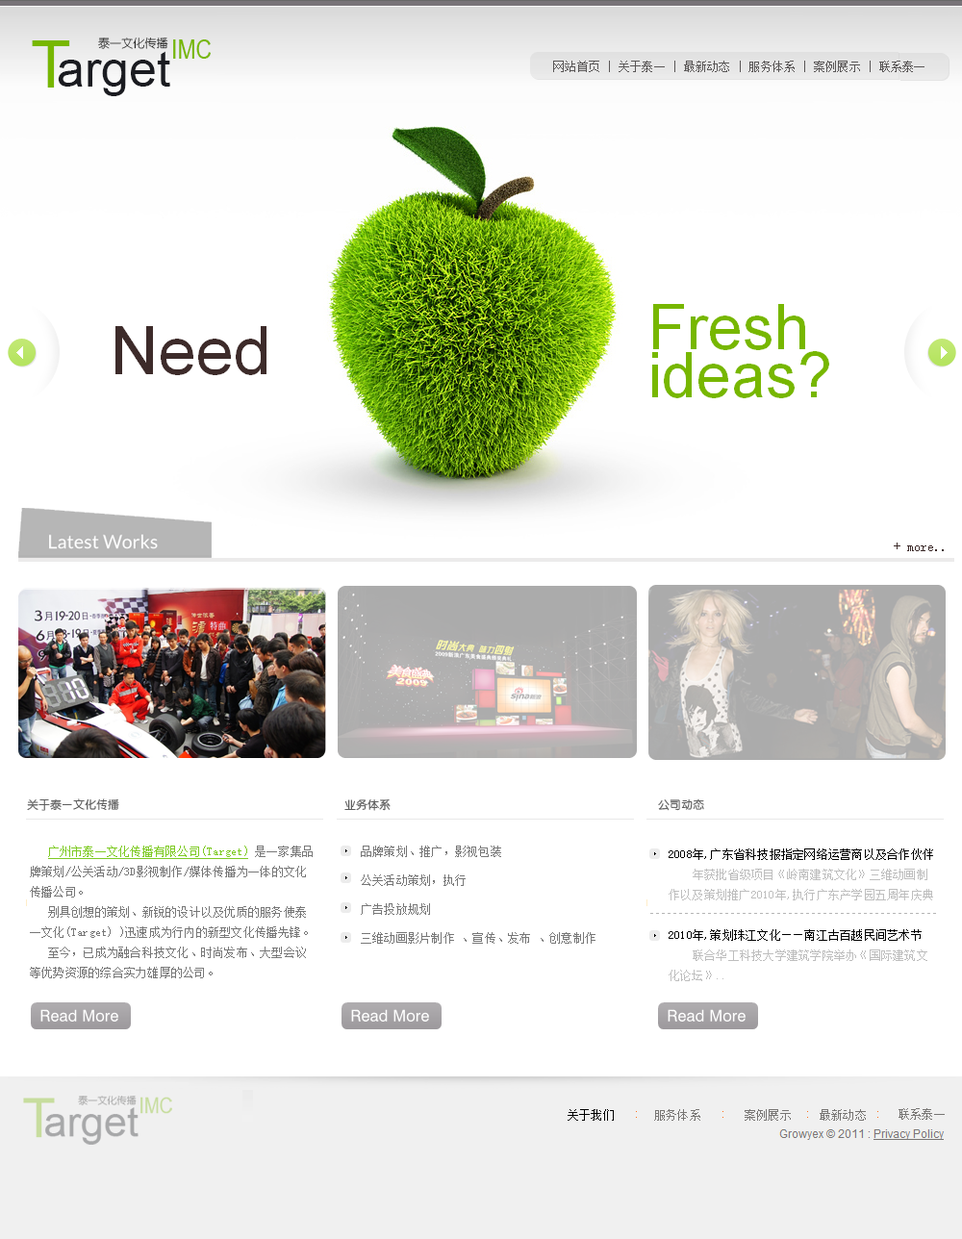
<style>
.page{position:relative;width:962px;height:1239px;background:#ffffff}
.page>*{position:absolute;margin:0}
.t1{font:65.4px "ArialMT";color:#77b700}
.t2{font:11.5px "FZY1JW--GB1-0"}
.t3{font:26.9px "ArialNarrow";color:#77b700}
.t4{font:50px "ArialMT";color:#1b1c21}
.t5{font:11.5px "SimSun";letter-spacing:0.02em;color:#595656}
.t6{font:13.5px "SimSun";color:#3d2b2a}
.t7{font:11.5px "HYe3gj";color:#5e5e5e}
.t8{font:11.5px "SimSun";letter-spacing:0.02em;color:#777777}
.t9{font:11.5px "SimSun";letter-spacing:0.02em;color:#7eca24}
.t10{font:11.5px/28.9px "SimSun";letter-spacing:0.02em;color:#777777}
.t11{font:11.5px "SimSun";letter-spacing:0.02em;color:#bebebe}
.t12{font:11.5px "SimSun";letter-spacing:0.02em;color:#000000}
.t13{font:11.5px "SimSun";letter-spacing:0.02em;color:#787674}
</style>
<div class="page">
<p class="t1" style="left:32px;top:40px;width:38px;height:48px">T</p>
<p class="t2" style="left:98px;top:38px;width:70px;height:11px">泰一文化传播</p>
<p class="t3" style="left:173px;top:39px;width:38px;height:20px">IMC</p>
<p class="t4" style="left:58px;top:51px;width:112px;height:45px">arget</p>
<p class="t5" style="left:553px;top:61px;width:372px;height:11px">网站首页 | 关于泰一 | 最新动态 | 服务体系 | 案例展示 | 联系泰一</p>
<p class="t6" style="left:894px;top:543px;width:50px;height:8px">+ more..</p>
<p class="t7" style="left:27px;top:799px;width:92px;height:12px">关于泰一文化传播</p>
<p class="t7" style="left:344px;top:800px;width:47px;height:11px">业务体系</p>
<p class="t7" style="left:658px;top:799px;width:46px;height:12px">公司动态</p>
<p class="t8" style="left:30px;top:846px;width:283px;height:133px"><span class="t9">广州市泰一文化传播有限公司(Target)</span> 是一家集品牌策划/公关活动/3D影视制作/媒体传播为一体的文化传播公司。<br>   别具创想的策划、新锐的设计以及优质的服务使泰一文化(Target) )迅速成为行内的新型文化传播先锋。<br>   至今，已成为融合科技文化、时尚发布、大型会议等优势资源的综合实力雄厚的公司。</p>
<p class="t10" style="left:361px;top:846px;width:235px;height:98px">品牌策划、推广，影视包装<br>公关活动策划，执行<br>广告投放规划<br>三维动画影片制作 、宣传、发布 、创意制作</p>
<p class="t11" style="left:669px;top:849px;width:264px;height:132px"><span class="t12">2008年,广东省科技报指定网络运营商以及合作伙伴<br>  </span>  年获批省级项目《岭南建筑文化》三维动画制作以及策划推广2010年,执行广东产学园五周年庆典<br><span class="t12"><br>2010年,策划珠江文化——南江古百越民间艺术节<br>   </span> 联合华工科技大学建筑学院举办《国际建筑文化论坛》..</p>
<p class="t12" style="left:568px;top:1109px;width:46px;height:12px">关于我们</p>
<p class="t13" style="left:654px;top:1109px;width:46px;height:12px">服务体系</p>
<p class="t13" style="left:745px;top:1109px;width:46px;height:12px">案例展示</p>
<p class="t13" style="left:820px;top:1109px;width:46px;height:12px">最新动态</p>
<p class="t13" style="left:899px;top:1108px;width:46px;height:12px">联系泰一</p>
</div>
